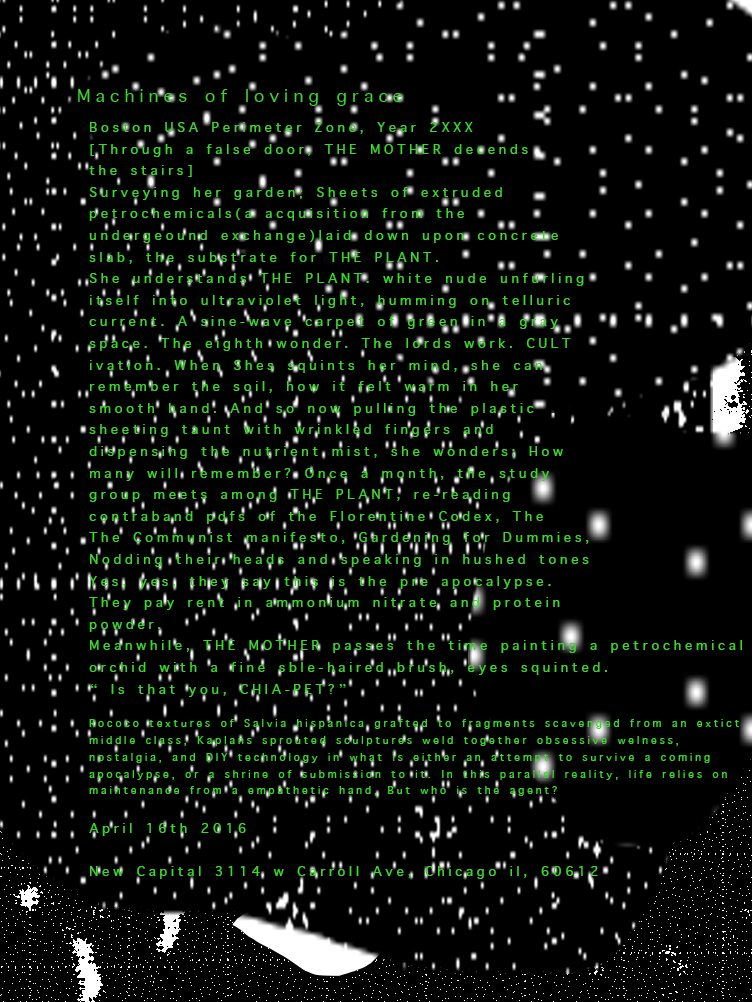
<style>
.page{position:relative;width:752px;height:1002px;background:#000000}
.page>*{position:absolute;margin:0}
.t1{font:18px "AppleSymbols";letter-spacing:0.21em;color:#3bd72b}
.t2{font:14px "AppleSymbols";letter-spacing:0.21em;color:#3bd72b}
</style>
<div class="page">
<p class="t1" style="left:89px;top:122px;width:653px;height:757px">Boston USA Perimeter Zone, Year 2XXX<br>[Through a false door, THE MOTHER decends<br>the stairs]<br>Surveying her garden; Sheets of extruded<br>petrochemicals(a acquisition from the <br>undergeound exchange)laid down upon concrete<br>slab, the substrate for THE PLANT.<br>She understands THE PLANT. white nude unfurling<br>itself into ultraviolet light, humming on telluric<br>current. A sine-wave carpet of green in a gray<br>space. The eighth wonder. The lords work. CULT<br>ivation. When Shes squints her mind, she can<br>remember the soil, how it felt warm in her<br>smooth hand. And so now pulling the plastic<br>sheeting taunt with wrinkled fingers and <br>dispensing the nutrient mist, she wonders: How<br>many will remember? Once a month, the study<br>group meets among THE PLANT, re-reading<br>contraband pdfs of the Florentine Codex, The <br>The Communist manifesto, Gardening for Dummies,<br>Nodding their heads and speaking in hushed tones<br>Yes, yes, they say this is the pre apocalypse.<br>They pay rent in ammonium nitrate and protein<br>powder.<br>Meanwhile, THE MOTHER passes the time painting a petrochemical<br>orchid with a fine sble-haired brush, eyes squinted.<br>“ Is that you, CHIA-PET?”<br><span class="t2"><br>Rococo textures of Salvia hispanica grafted to fragments scavenged from an extict<br>middle class, Kaplans sprouted sculptures weld together obsessive welness,<br>nostalgia, and DIY technology in what is either an attempt to survive a coming<br>apocalypse, or a shrine of submission to it. In this parallel reality, life relies on<br>maintenance from a empathetic hand, But who is the agent?<br><br></span>April 16th 2016<br><br>New Capital 3114 w Carroll Ave, Chicago il, 60612</p>
</div>
